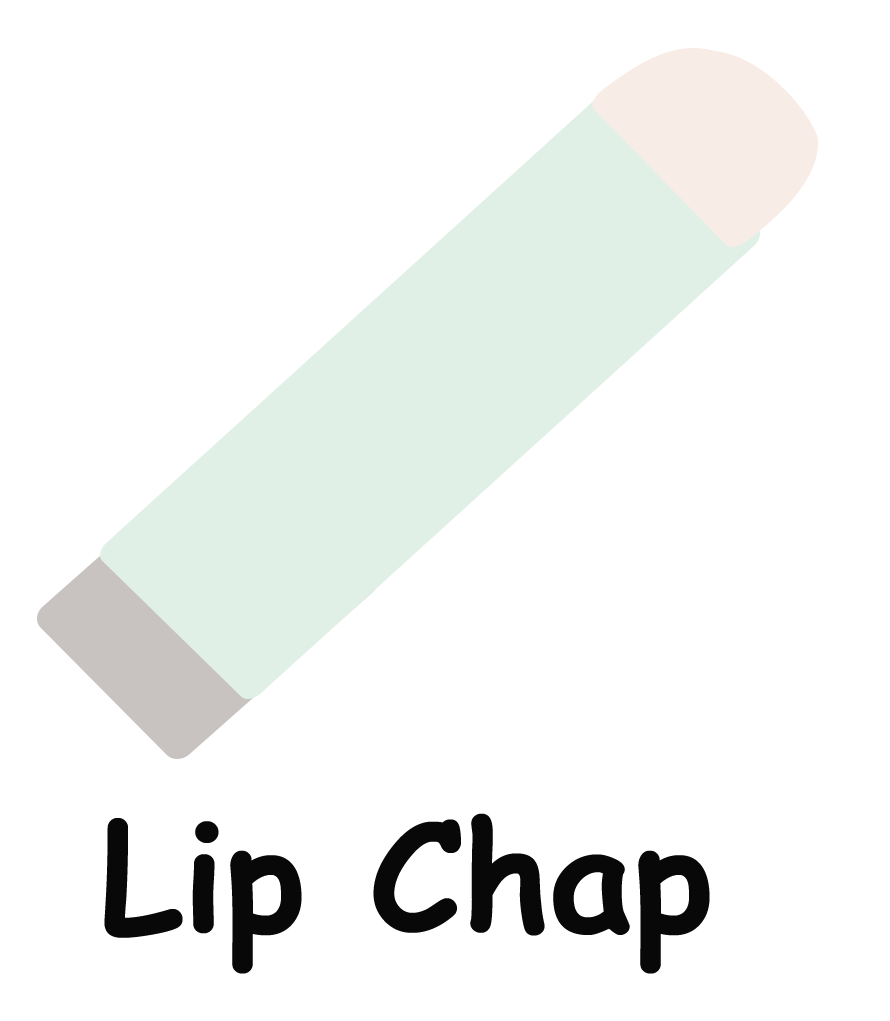
<style>
.page{position:relative;width:890px;height:1021px;background:#ffffff}
.page>*{position:absolute;margin:0}
.t1{font:150px "ComicSansMS-Bold";color:#080808}
</style>
<div class="page">
<p class="t1" style="left:104px;top:813px;width:606px;height:161px">Lip Chap</p>
</div>
